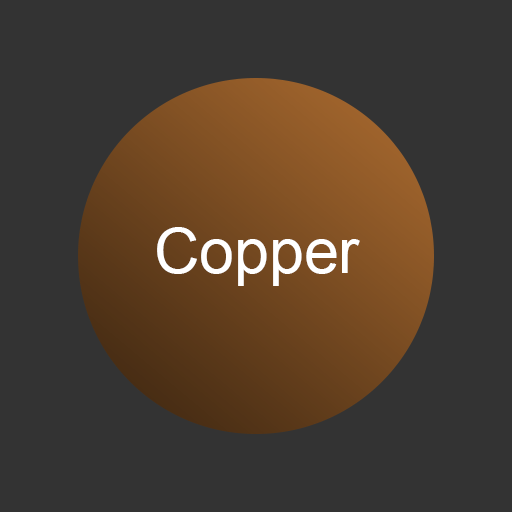
<style>
.page{position:relative;width:512px;height:512px;background:#333333}
.page>*{position:absolute;margin:0}
.t1{font:62.5px "ArialMT";color:#ffffff}
</style>
<div class="page">
<p class="t1" style="left:157px;top:227px;width:203px;height:59px">Copper</p>
</div>
